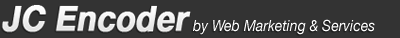
<style>
.page{position:relative;width:400px;height:38px;background:#333333}
.page>*{position:absolute;margin:0}
.t1{font:15.4px "HelveticaNeue-Italic";color:#ffffff;scale:0.91 1}
</style>
<div class="page">
<p class="t1" style="left:193px;top:19px;width:182px;height:16px">by Web Marketing &amp; Services</p>
</div>
